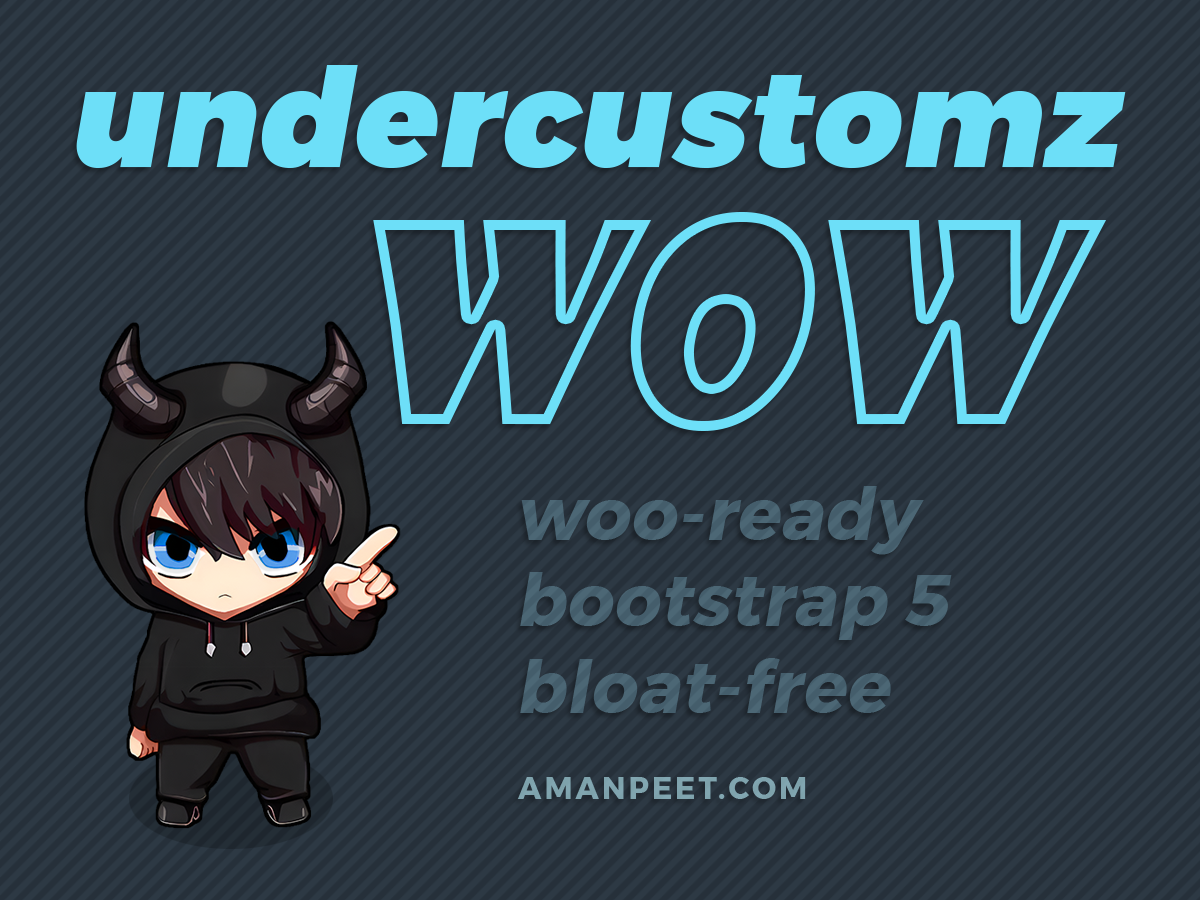
<style>
.page{position:relative;width:1200px;height:900px;background:#26303a}
.page>*{position:absolute;margin:0}
.t1{font:136px "Montserrat-Black";letter-spacing:0.01em;color:#6ddff8;font-style:italic}
.t2{font:272px "ShowcardGothic-Reg";letter-spacing:-0.025em;text-transform:uppercase;font-style:italic}
.t3{font:72px "Montserrat-Bold";letter-spacing:0.01em;color:#486270;font-style:italic}
.t4{font:30px "Montserrat-Bold";letter-spacing:0.1em;color:#7fa4ae;text-transform:uppercase}
</style>
<div class="page">
<p class="t1" style="left:76px;top:65px;width:1050px;height:103px">undercustomz</p>
<p class="t2" style="left:373px;top:212px;width:734px;height:219px">wow</p>
<p class="t3" style="left:520px;top:486px;width:432px;height:227px">woo-ready<br>bootstrap 5<br>bloat-free</p>
<p class="t4" style="left:517px;top:777px;width:289px;height:22px">Amanpeet.com</p>
</div>
